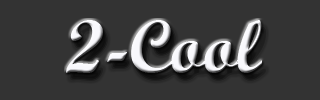
<style>
.page{position:relative;width:320px;height:100px;background:#333333}
.page>*{position:absolute;margin:0}
.t1{font:75px "ScriptMTBold";color:#f8f8fc}
</style>
<div class="page">
<p class="t1" style="left:66px;top:20px;width:196px;height:53px">2-Cool</p>
</div>
